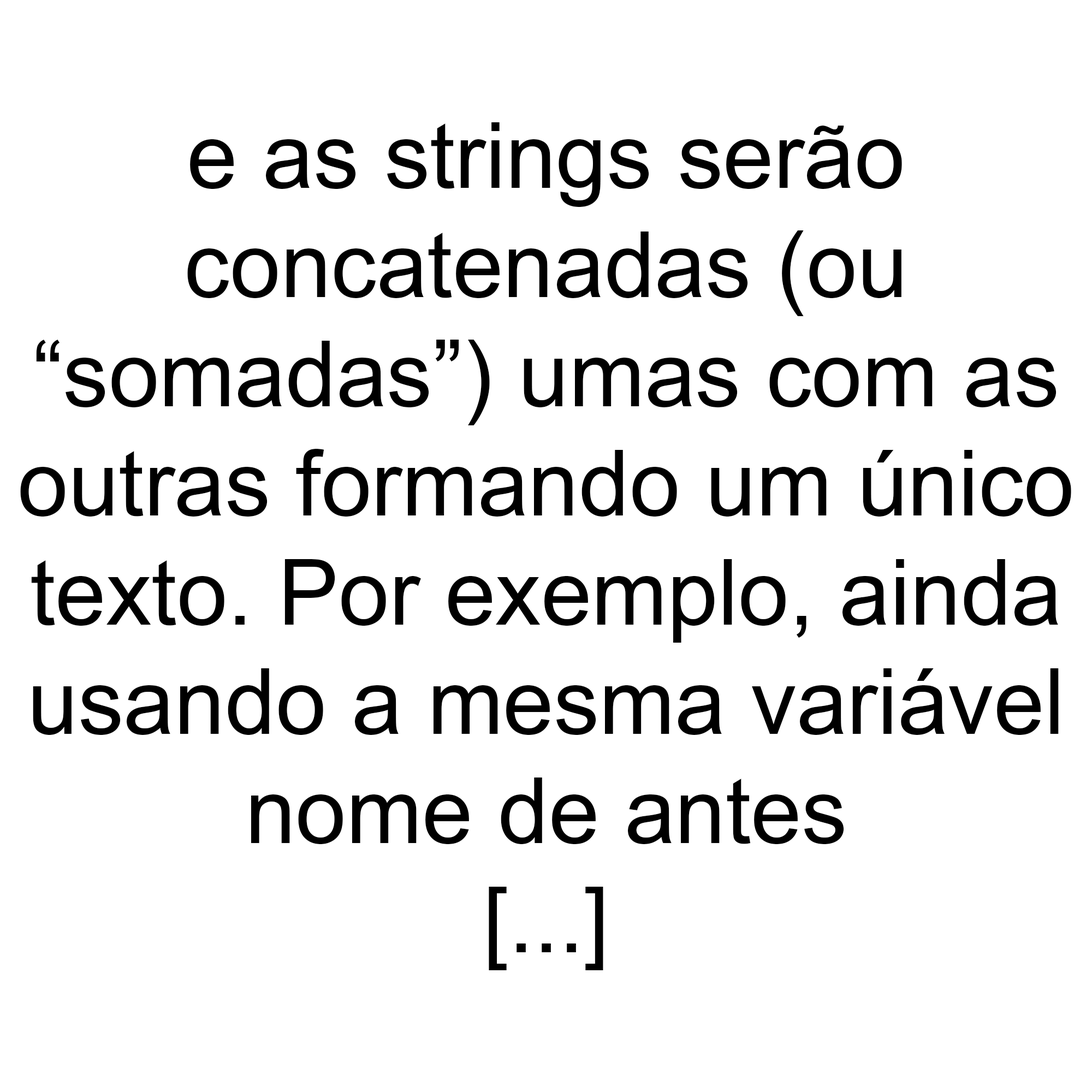
<style>
.page{position:relative;width:1092px;height:1092px;background:#ffffff}
.page>*{position:absolute;margin:0}
.t1{font:91px "ArialMT";color:#000000}
</style>
<div class="page">
<p class="t1" style="left:20px;top:122px;width:1051px;height:848px;text-align:center">e as strings serão<br>concatenadas (ou<br>“somadas”) umas com as<br>outras formando um único<br>texto. Por exemplo, ainda<br>usando a mesma variável<br>nome de antes<br>[...]</p>
</div>
